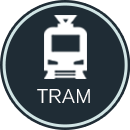
<style>
.page{position:relative;width:130px;height:130px;background:#1f2c35}
.page>*{position:absolute;margin:0}
.t1{font:19.8px "AkzidenzGroteskBE-Light";color:#ffffff}
</style>
<div class="page">
<p class="t1" style="left:37px;top:89px;width:53px;height:14px">TRAM</p>
</div>
